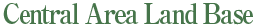
<style>
.page{position:relative;width:258px;height:27px;background:#ffffff}
.page>*{position:absolute;margin:0}
.t1{font:28px "RyuminPro-ExBold";letter-spacing:-0.08em;color:#46754a;scale:0.9 1}
</style>
<div class="page">
<p class="t1" style="left:3px;top:3px;width:250px;height:22px">Central Area Land Base</p>
</div>
